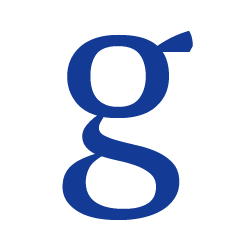
<style>
.page{position:relative;width:250px;height:250px;background:#ffffff}
.page>*{position:absolute;margin:0}
.t1{font:256px "PTSerif-Regular";color:#133b95}
</style>
<div class="page">
<p class="t1" style="left:62px;top:30px;width:131px;height:190px">g</p>
</div>
